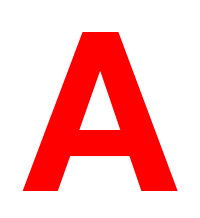
<style>
.page{position:relative;width:200px;height:218px;background:#ffffff}
.page>*{position:absolute;margin:0}
.t1{font:222.4px "HelveticaNeue-Bold";color:#ff0000}
</style>
<div class="page">
<p class="t1" style="left:22px;top:32px;width:156px;height:159px">A</p>
</div>
